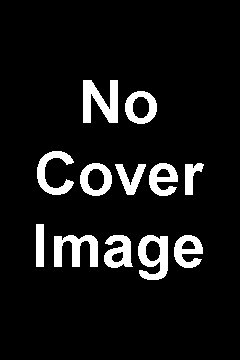
<style>
.page{position:relative;width:240px;height:360px;background:#000000}
.page>*{position:absolute;margin:0}
.t1{font:60px "Arial-BoldMT";color:#ffffff}
</style>
<div class="page">
<p class="t1" style="left:36px;top:80px;width:168px;height:200px;text-align:center">No<br>Cover<br>Image</p>
</div>
